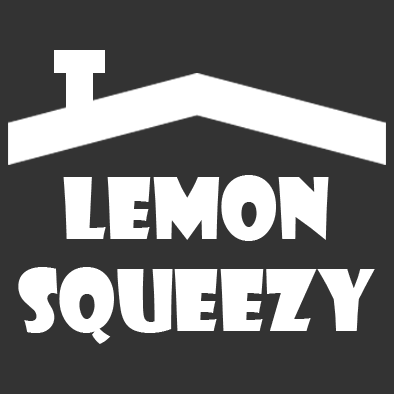
<style>
.page{position:relative;width:394px;height:394px;background:#333333}
.page>*{position:absolute;margin:0}
.t1{font:82.2px "ShowcardGothic-Reg";color:#ffffff}
</style>
<div class="page">
<p class="t1" style="left:63px;top:175px;width:266px;height:66px">LEMON</p>
<p class="t1" style="left:18px;top:267px;width:357px;height:77px">SQUEEZY</p>
</div>
